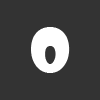
<style>
.page{position:relative;width:100px;height:100px;background:#333333}
.page>*{position:absolute;margin:0}
.t1{font:58.3px "ShowcardGothic-Reg";color:#ffffff}
</style>
<div class="page">
<p class="t1" style="left:31px;top:27px;width:39px;height:46px">o</p>
</div>
